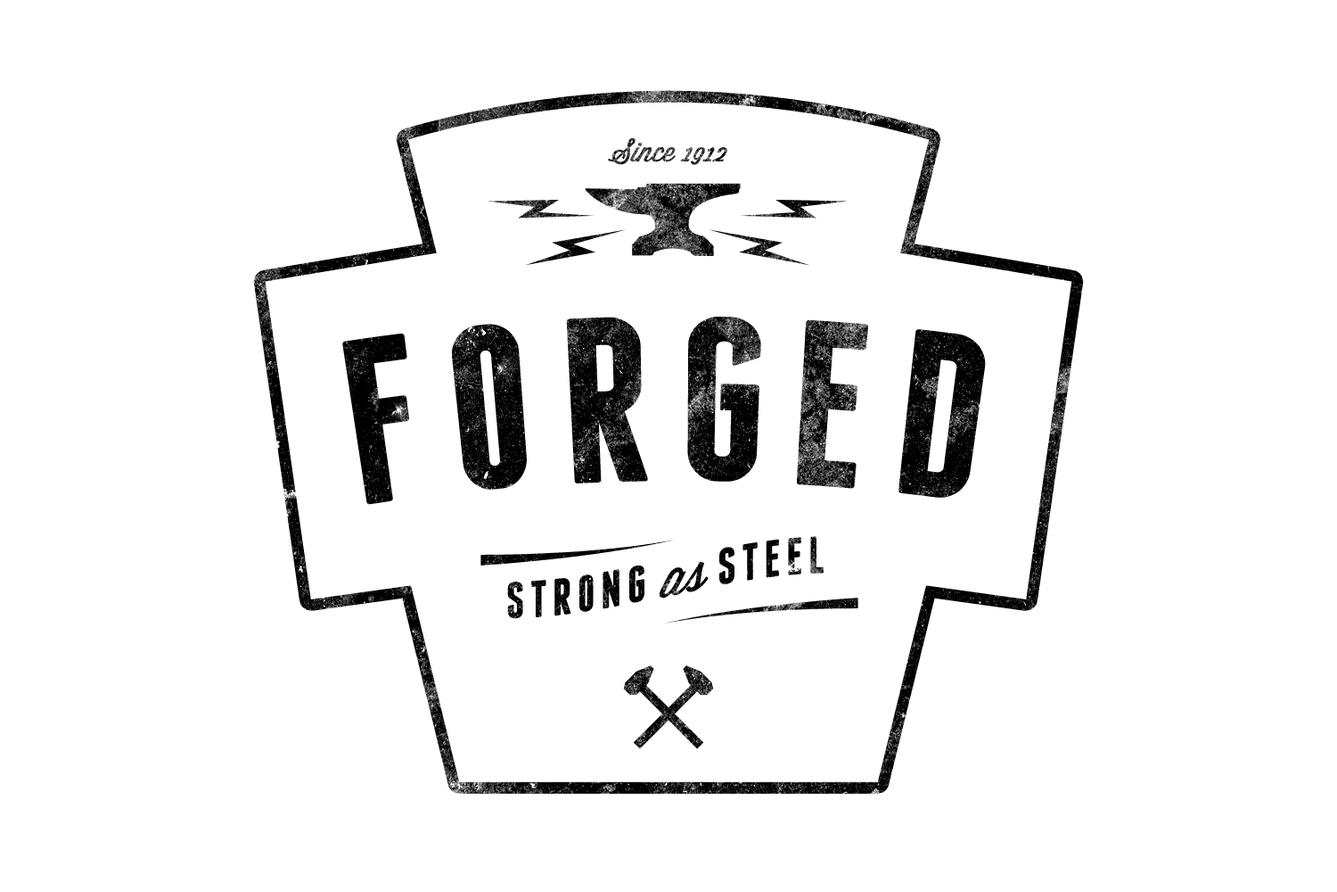
<style>
.page{position:relative;width:1337px;height:892px;background:#ffffff}
.page>*{position:absolute;margin:0}
.t1{font:27.8px "WisdomScriptAI"}
.t2{font:233.3px "Franchise-Bold";letter-spacing:0.1em;color:#000000;text-transform:uppercase}
.t3{font:51.6px "Franchise-Bold";letter-spacing:0.1em;color:#000000;text-transform:uppercase}
.t4{font:51.6px "WisdomScriptAI";color:#000000}
</style>
<div class="page">
<p class="t1" style="left:608px;top:137px;width:120px;height:28px">Since 1912</p>
<p class="t2" style="left:342px;top:317px;width:644px;height:188px">FORGED</p>
<p class="t3" style="left:507px;top:536px;width:317px;height:83px">Strong <span class="t4">as</span> steel</p>
</div>
